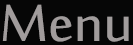
<style>
.page{position:relative;width:133px;height:45px;background:#060606}
.page>*{position:absolute;margin:0}
.t1{font:72px "SakkalMajalla";color:#a19c9c}
</style>
<div class="page">
<p class="t1" style="left:2px;top:4px;width:127px;height:38px">Menu</p>
</div>
